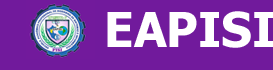
<style>
.page{position:relative;width:273px;height:70px;background:#711a9c}
.page>*{position:absolute;margin:0}
.t1{font:48px "Tahoma-Bold";color:#ffffff}
</style>
<div class="page">
<p class="t1" style="left:107px;top:11px;width:166px;height:37px">EAPISI</p>
</div>
